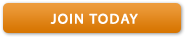
<style>
.page{position:relative;width:185px;height:37px}
.page>*{position:absolute;margin:0}
.t1{font:14px "MyriadWebPro";letter-spacing:0.075em;color:#ffffff;text-transform:uppercase;font-weight:bold}
</style>
<div class="page">
<p class="t1" style="left:50px;top:13px;width:88px;height:11px">Join Today</p>
</div>
